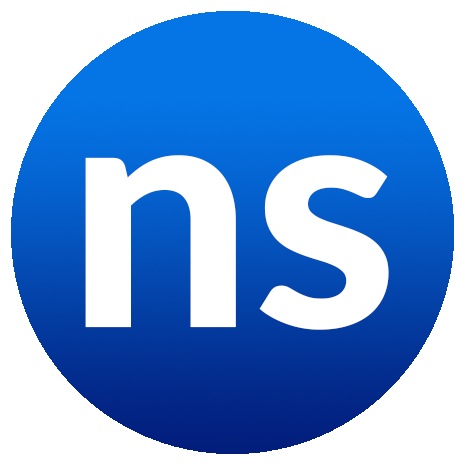
<style>
.page{position:relative;width:466px;height:466px;background:#ffffff}
.page>*{position:absolute;margin:0}
.t1{font:328.1px "Lato-Heavy";color:#ffffff}
</style>
<div class="page">
<p class="t1" style="left:85px;top:155px;width:304px;height:175px">ns</p>
</div>
